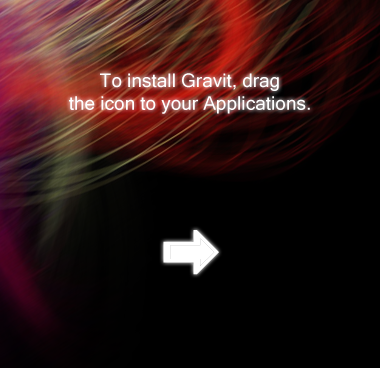
<style>
.page{position:relative;width:380px;height:368px;background:#000000}
.page>*{position:absolute;margin:0}
.t1{font:19px "MicrosoftSansSerif";color:#ffffff}
</style>
<div class="page">
<p class="t1" style="left:69px;top:73px;width:241px;height:41px;text-align:center">To install Gravit, drag<br>the icon to your Applications.</p>
</div>
